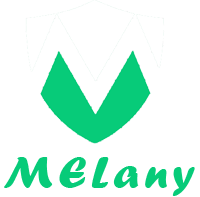
<style>
.page{position:relative;width:200px;height:197px;background:#ffffff}
.page>*{position:absolute;margin:0}
.t1{font:46px "ForteMT";letter-spacing:0.1em;color:#07cb79}
</style>
<div class="page">
<p class="t1" style="left:4px;top:157px;width:191px;height:39px">MELany</p>
</div>
